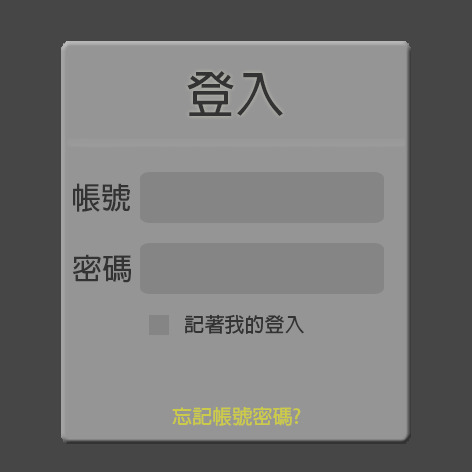
<style>
.page{position:relative;width:472px;height:472px;background:#959595}
.page>*{position:absolute;margin:0}
.t1{font:50px "AdobeFanHeitiStd-Bold";color:#333333}
.t2{font:30px "AdobeFanHeitiStd-Bold";color:#333333}
.t3{font:20px "AdobeFanHeitiStd-Bold";color:#333333}
.t4{font:20px "AdobeFanHeitiStd-Bold";color:#ccca49}
</style>
<div class="page">
<p class="t1" style="left:187px;top:71px;width:96px;height:45px">登入</p>
<p class="t2" style="left:73px;top:183px;width:57px;height:29px">帳號</p>
<p class="t2" style="left:72px;top:254px;width:59px;height:29px">密碼</p>
<p class="t3" style="left:185px;top:314px;width:119px;height:20px">記著我的登入</p>
<p class="t4" style="left:172px;top:406px;width:129px;height:20px">忘記帳號密碼?</p>
</div>
